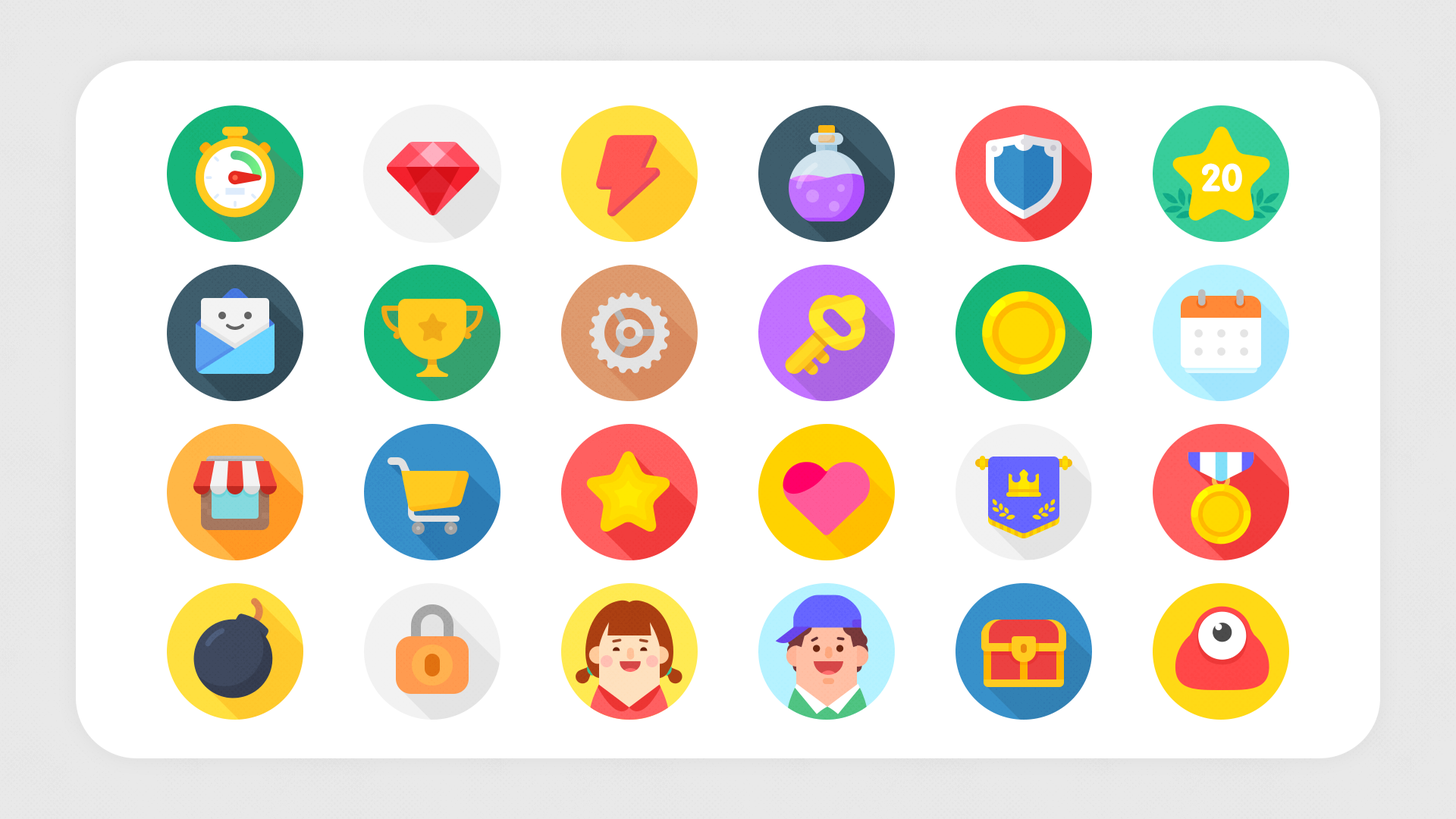
<style>
.page{position:relative;width:1456px;height:819px;background:#ffffff}
.page>*{position:absolute;margin:0}
.t1{font:36px "BPreplay-Bold";letter-spacing:-0.01em;color:#ffffff;scale:1.05 1}
</style>
<div class="page">
<p class="t1" style="left:1202px;top:163px;width:40px;height:29px">20</p>
</div>
